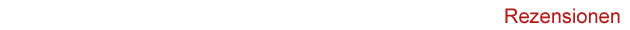
<style>
.page{position:relative;width:630px;height:30px;background:#ffffff}
.page>*{position:absolute;margin:0}
.t1{font:20px "ArialMT";color:#b61717}
.t2{font:18px "ArialMT";color:#b61717}
</style>
<div class="page">
<p class="t1" style="left:505px;top:8px;width:115px;height:16px"><span class="t2">                                              </span>Rezensionen</p>
</div>
